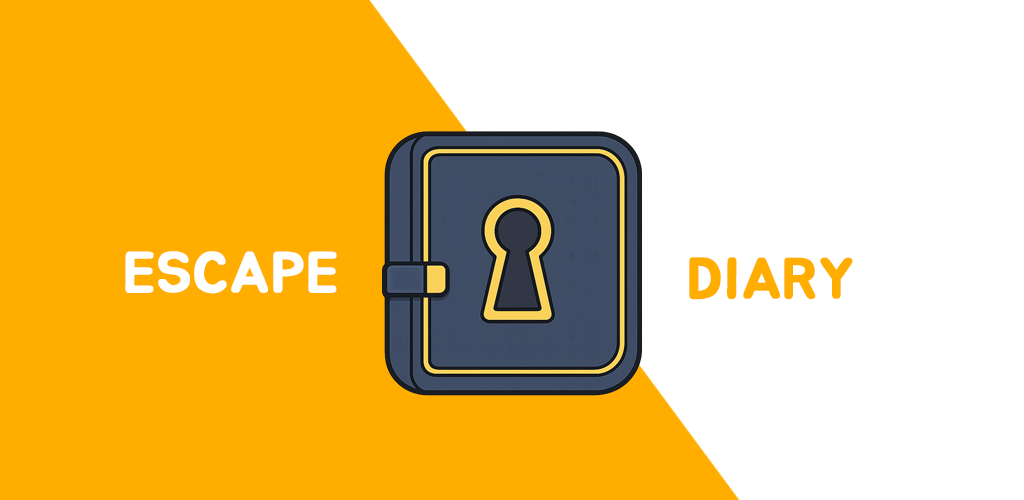
<style>
.page{position:relative;width:1024px;height:500px;background:#ffae00}
.page>*{position:absolute;margin:0}
.t1{font:57.1px "BMJUAOTF";color:#ffffff;font-weight:bold}
.t2{font:57.1px "BMJUAOTF";color:#ffae00;font-weight:bold}
</style>
<div class="page">
<p class="t1" style="left:125px;top:251px;width:212px;height:43px">ESCAPE</p>
<p class="t2" style="left:689px;top:257px;width:164px;height:43px">DIARY</p>
</div>
